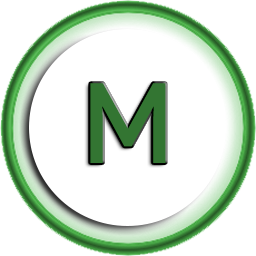
<style>
.page{position:relative;width:256px;height:256px;background:#ffffff}
.page>*{position:absolute;margin:0}
.t1{font:111.3px "ProductSans-Medium";color:#337532;scale:0.96 1}
</style>
<div class="page">
<p class="t1" style="left:90px;top:83px;width:76px;height:80px">M</p>
</div>
